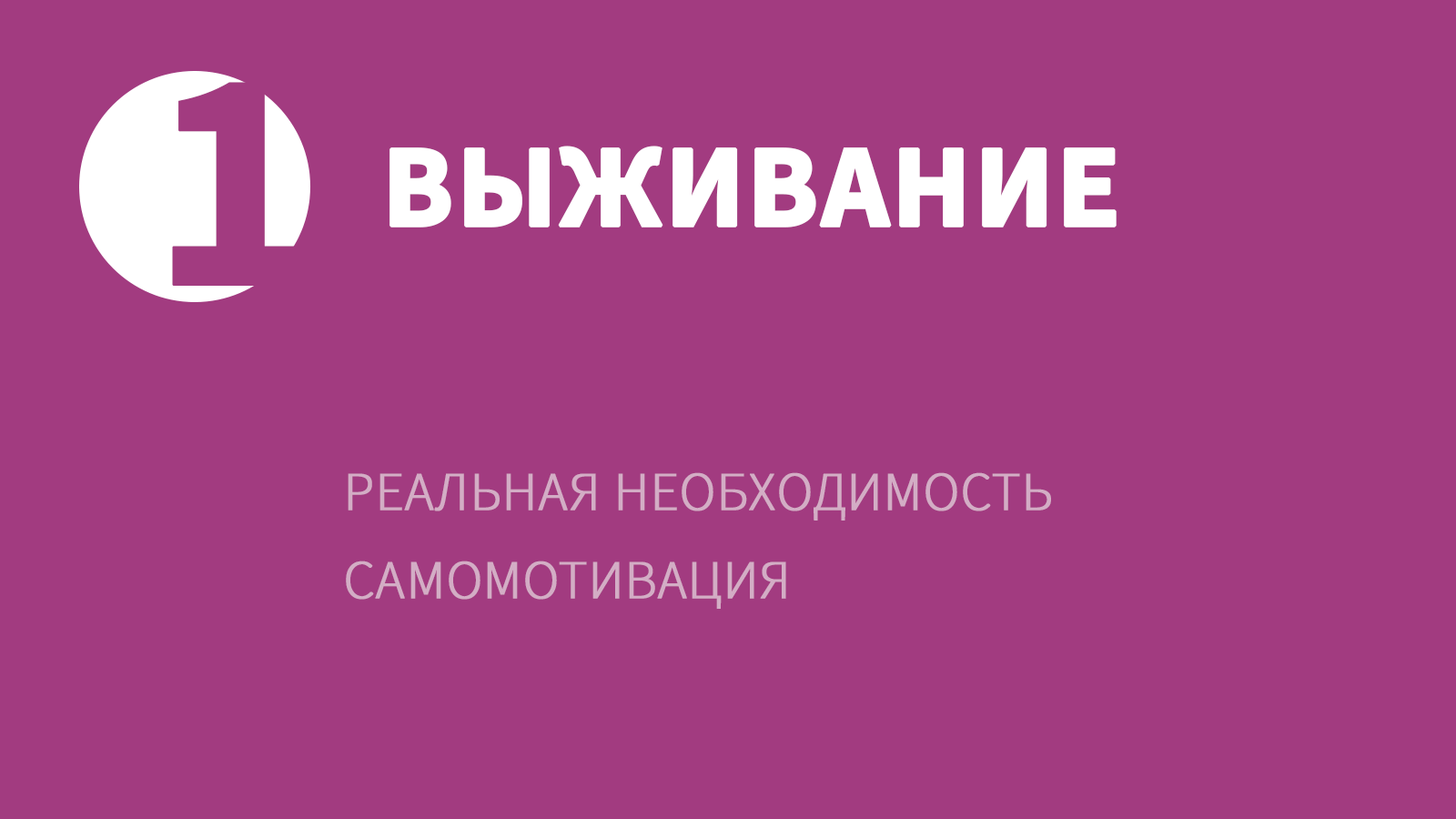
<style>
.page{position:relative;width:1456px;height:819px;background:#a23b80}
.page>*{position:absolute;margin:0}
.t1{font:317.8px "SourceSansPro-Bold";color:#a23b80;text-transform:uppercase;font-weight:bold}
.t2{font:117.4px "SourceSansPro-Bold";color:#ffffff;text-transform:uppercase;font-weight:bold}
.t3{font:54.6px "SourceSansPro-Light";color:#d3adc5;text-transform:uppercase;font-weight:bold}
</style>
<div class="page">
<p class="t1" style="left:172px;top:82px;width:131px;height:204px">1</p>
<p class="t2" style="left:389px;top:146px;width:728px;height:81px">выживание</p>
<p class="t3" style="left:348px;top:472px;width:703px;height:49px">реальная необходимость</p>
<p class="t3" style="left:346px;top:561px;width:440px;height:48px">самомотивация</p>
</div>
